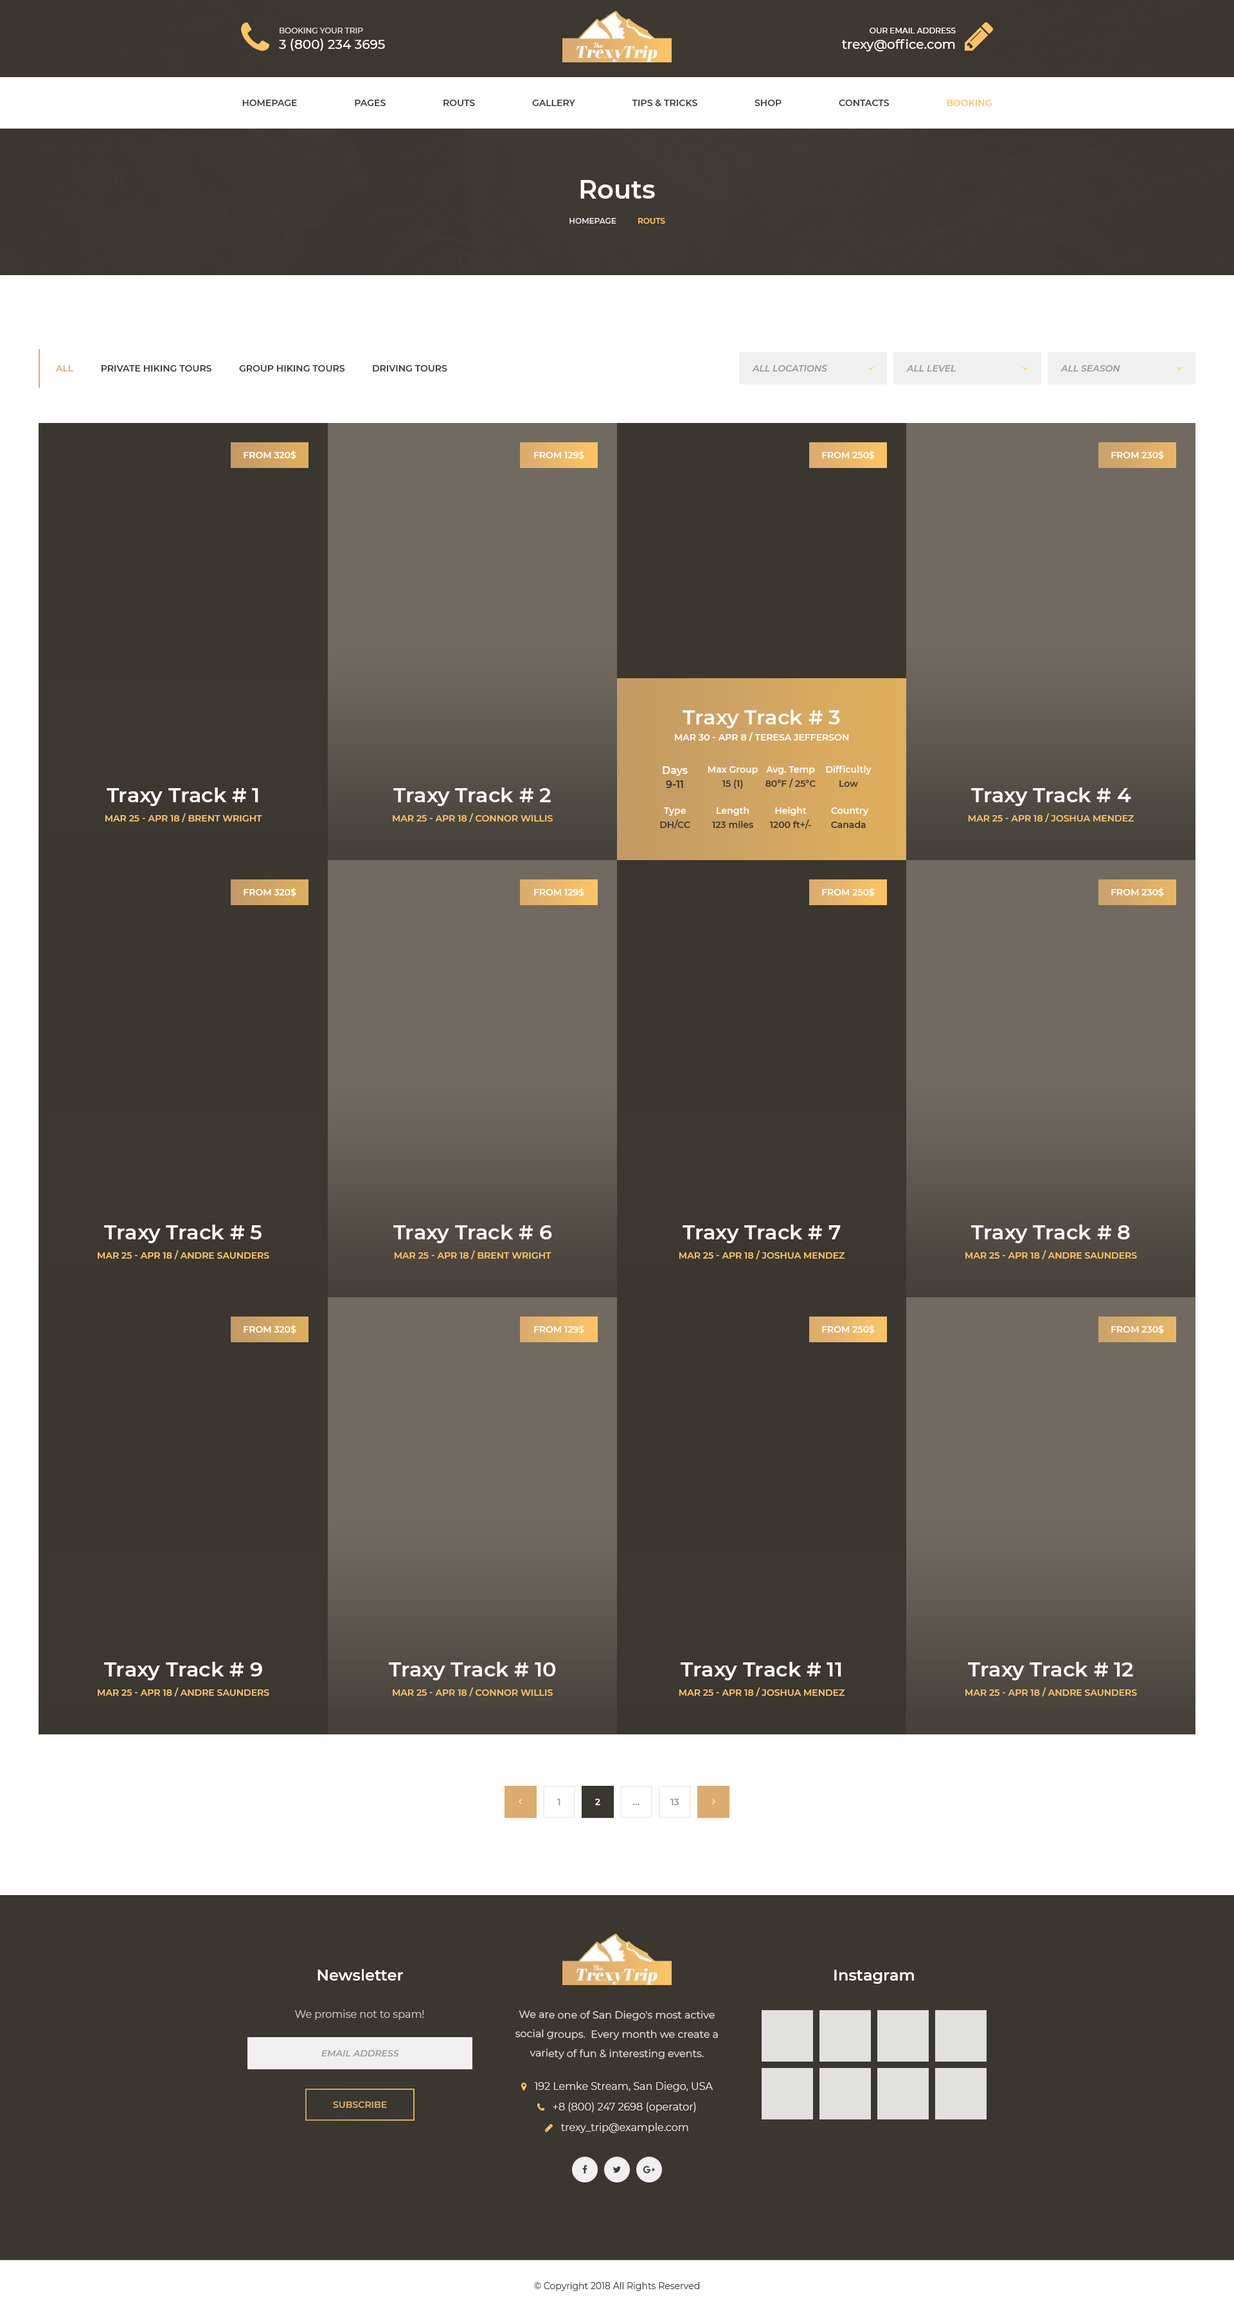
<style>
.page{position:relative;width:1234px;height:2311px;background:#3a3630}
.page>*{position:absolute;margin:0}
.t1{font:7.7px "Montserrat-Medium";color:#e1e1e0;text-transform:uppercase}
.t2{font:7.7px "Montserrat-Medium";color:#fefefe;text-transform:uppercase}
.t3{font:12.9px "Montserrat-Medium";color:#ffffff;text-transform:uppercase}
.t4{font:12.9px "Montserrat-Medium";color:#ffffff}
.t5{font:16.7px "AbrilFatface-Regular";color:#fefefe;font-style:italic}
.t6{font:9px "Montserrat-SemiBold";color:#3a3630;text-transform:uppercase}
.t7{font:9px "Montserrat-SemiBold";color:#fdc465;text-transform:uppercase}
.t8{font:25.7px "Montserrat-SemiBold";color:#ffffff}
.t9{font:7.7px "Montserrat-SemiBold";color:#dedfdf;text-transform:uppercase}
.t10{font:7.7px "Montserrat-SemiBold";color:#fcc465;text-transform:uppercase}
.t11{font:9px "Montserrat-SemiBold";color:#dbac6d;text-transform:uppercase}
.t12{font:9px "Montserrat-SemiBoldItalic";color:#9e978f;text-transform:uppercase}
.t13{font:9px "Montserrat-SemiBold";color:#ffffff;text-transform:uppercase}
.t14{font:20.6px "Montserrat-SemiBold";color:#ffffff}
.t15{font:10.3px/14.1px "Montserrat-SemiBold";color:#ffffff}
.t16{font:10.3px/14.1px "Montserrat-SemiBold";color:#3b3731}
.t17{font:9px/14.1px "Montserrat-SemiBold";color:#ffffff}
.t18{font:9px/14.1px "Montserrat-SemiBold";color:#3b3731}
.t19{font:9px/14.1px "Montserrat-SemiBold";color:#ef90a4}
.t20{font:9px/9px "Montserrat-SemiBold";color:#fcc465;text-transform:uppercase}
.t21{font:9px "Montserrat-SemiBold";color:#fcc465;text-transform:uppercase}
.t22{font:9px "Montserrat-SemiBold";color:#979087}
.t23{font:9px "Montserrat-SemiBold";color:#ffffff}
.t24{font:15.4px "Montserrat-SemiBold";color:#ffffff}
.t25{font:10.3px "Montserrat-Regular";color:#c7c7c5}
.t26{font:10.3px/19.3px "Montserrat-Regular";color:#e1e1e0}
.t27{font:9px "Montserrat-Regular";color:#3a3630}
</style>
<div class="page">
<p class="t1" style="left:280px;top:28px;width:83px;height:5px">Booking your trip</p>
<p class="t2" style="left:870px;top:28px;width:86px;height:5px">Our Email address</p>
<p class="t3" style="left:279px;top:39px;width:106px;height:12px">3 (800) 234 3695</p>
<p class="t4" style="left:842px;top:39px;width:113px;height:12px">trexy@office.com</p>
<p class="t5" style="left:577px;top:46px;width:81px;height:16px">TrexyTrip</p>
<p class="t6" style="left:242px;top:100px;width:750px;height:6px">Homepage                       Pages                       Routs                       Gallery                       Tips &amp; Tricks                       Shop                       Contacts                       <span class="t7">Booking</span></p>
<p class="t8" style="left:580px;top:180px;width:75px;height:19px">Routs</p>
<p class="t9" style="left:570px;top:218px;width:95px;height:6px">homepage          <span class="t10">Routs</span></p>
<p class="t6" style="left:55px;top:365px;width:392px;height:7px"><span class="t11">all           </span>PRIVATE HIKING TOURS           GROUP HIKING TOURS           DRIVING TOURS</p>
<p class="t12" style="left:752px;top:365px;width:75px;height:7px">All locations</p>
<p class="t12" style="left:906px;top:365px;width:50px;height:7px">All level</p>
<p class="t12" style="left:1061px;top:365px;width:59px;height:7px">All Season</p>
<p class="t13" style="left:244px;top:451px;width:52px;height:9px">from 320$</p>
<p class="t13" style="left:534px;top:451px;width:50px;height:9px">from 129$</p>
<p class="t13" style="left:822px;top:451px;width:53px;height:9px">from 250$</p>
<p class="t13" style="left:1112px;top:451px;width:52px;height:9px">from 230$</p>
<p class="t14" style="left:683px;top:710px;width:157px;height:18px">Traxy Track # 3</p>
<p class="t13" style="left:675px;top:732px;width:174px;height:9px">mar 30 - apr 8 / Teresa Jefferson</p>
<p class="t15" style="left:663px;top:766px;width:25px;height:22px;text-align:center">Days<br><span class="t16">9-11</span></p>
<p class="t17" style="left:708px;top:766px;width:50px;height:23px;text-align:center">Max Group<br><span class="t18">15 (1)</span></p>
<p class="t18" style="left:766px;top:766px;width:50px;height:22px;text-align:center"><span class="t17">Avg. Temp <br></span>80°F / 25°C</p>
<p class="t17" style="left:826px;top:766px;width:46px;height:21px;text-align:center">Difficultly<br><span class="t18">Low</span></p>
<p class="t14" style="left:107px;top:788px;width:151px;height:18px">Traxy Track # 1</p>
<p class="t14" style="left:393px;top:788px;width:158px;height:18px">Traxy Track # 2</p>
<p class="t14" style="left:971px;top:788px;width:160px;height:18px">Traxy Track # 4</p>
<p class="t18" style="left:660px;top:807px;width:30px;height:22px;text-align:center"><span class="t17">Type<br></span>DH/CC</p>
<p class="t18" style="left:712px;top:807px;width:41px;height:21px;text-align:center"><span class="t17">Length<br></span>123 miles</p>
<p class="t18" style="left:770px;top:807px;width:41px;height:22px;text-align:center"><span class="t17">Height<br></span>1200 ft+/-<br><span class="t17">0a4net</span></p>
<p class="t17" style="left:831px;top:807px;width:38px;height:21px;text-align:center">Country<br><span class="t18">Canada<br></span><span class="t19">brue<br></span>0a4net</p>
<p class="t20" style="left:105px;top:813px;width:157px;height:9px;text-align:center">mar 25 - apr 18 / Brent Wright<br>Connor Willis<br>Joshua Mendez<br>Andre Saunders</p>
<p class="t21" style="left:393px;top:813px;width:160px;height:9px">mar 25 - apr 18 / Connor Willis</p>
<p class="t20" style="left:968px;top:813px;width:167px;height:9px;text-align:center">mar 25 - apr 18 / Joshua Mendez<br>Andre Saunders</p>
<p class="t13" style="left:244px;top:888px;width:52px;height:9px">from 320$</p>
<p class="t13" style="left:534px;top:888px;width:50px;height:9px">from 129$</p>
<p class="t13" style="left:822px;top:888px;width:53px;height:9px">from 250$</p>
<p class="t13" style="left:1112px;top:888px;width:52px;height:9px">from 230$</p>
<p class="t14" style="left:104px;top:1225px;width:158px;height:18px">Traxy Track # 5</p>
<p class="t14" style="left:393px;top:1225px;width:159px;height:18px">Traxy Track # 6</p>
<p class="t14" style="left:683px;top:1225px;width:158px;height:18px">Traxy Track # 7</p>
<p class="t14" style="left:971px;top:1225px;width:159px;height:18px">Traxy Track # 8</p>
<p class="t21" style="left:98px;top:1250px;width:171px;height:9px">mar 25 - apr 18 / Andre Saunders</p>
<p class="t20" style="left:394px;top:1250px;width:158px;height:9px;text-align:center">mar 25 - apr 18 / Brent Wright<br>Connor Willis<br>Joshua Mendez<br>Andre Saunders</p>
<p class="t20" style="left:679px;top:1250px;width:166px;height:9px;text-align:center">mar 25 - apr 18 / Joshua Mendez<br>Andre Saunders</p>
<p class="t21" style="left:966px;top:1250px;width:171px;height:9px">mar 25 - apr 18 / Andre Saunders</p>
<p class="t13" style="left:244px;top:1325px;width:52px;height:9px">from 320$</p>
<p class="t13" style="left:534px;top:1325px;width:50px;height:9px">from 129$</p>
<p class="t13" style="left:822px;top:1325px;width:53px;height:9px">from 250$</p>
<p class="t13" style="left:1112px;top:1325px;width:52px;height:9px">from 230$</p>
<p class="t14" style="left:104px;top:1662px;width:158px;height:18px">Traxy Track # 9</p>
<p class="t14" style="left:389px;top:1662px;width:167px;height:18px">Traxy Track # 10</p>
<p class="t14" style="left:681px;top:1662px;width:161px;height:18px">Traxy Track # 11</p>
<p class="t14" style="left:968px;top:1662px;width:165px;height:18px">Traxy Track # 12</p>
<p class="t21" style="left:98px;top:1688px;width:171px;height:9px">mar 25 - apr 18 / Andre Saunders</p>
<p class="t20" style="left:393px;top:1688px;width:160px;height:9px;text-align:center">mar 25 - apr 18 / Connor Willis<br>Joshua Mendez<br>Andre Saunders</p>
<p class="t20" style="left:679px;top:1688px;width:166px;height:9px;text-align:center">mar 25 - apr 18 / Joshua Mendez<br>Andre Saunders</p>
<p class="t21" style="left:966px;top:1688px;width:171px;height:9px">mar 25 - apr 18 / Andre Saunders</p>
<p class="t22" style="left:557px;top:1799px;width:4px;height:7px">1</p>
<p class="t23" style="left:595px;top:1799px;width:5px;height:7px">2</p>
<p class="t22" style="left:633px;top:1803px;width:7px;height:3px">...</p>
<p class="t22" style="left:670px;top:1799px;width:10px;height:7px">13</p>
<p class="t24" style="left:318px;top:1969px;width:85px;height:12px">Newsletter</p>
<p class="t5" style="left:577px;top:1968px;width:81px;height:17px">TrexyTrip</p>
<p class="t24" style="left:834px;top:1970px;width:80px;height:14px">Instagram</p>
<p class="t25" style="left:295px;top:2010px;width:129px;height:10px">We promise not to spam!</p>
<p class="t26" style="left:516px;top:2010px;width:202px;height:50px;text-align:center">We are one of San Diego's most active social groups.  Every month we create a  variety of fun &amp; interesting events.<br> and activities.</p>
<p class="t12" style="left:321px;top:2050px;width:78px;height:7px">Email address</p>
<p class="t11" style="left:333px;top:2102px;width:54px;height:6px">Subscribe</p>
<p class="t27" style="left:534px;top:2282px;width:165px;height:9px">© Copyright 2018 All Rights Reserved</p>
</div>
